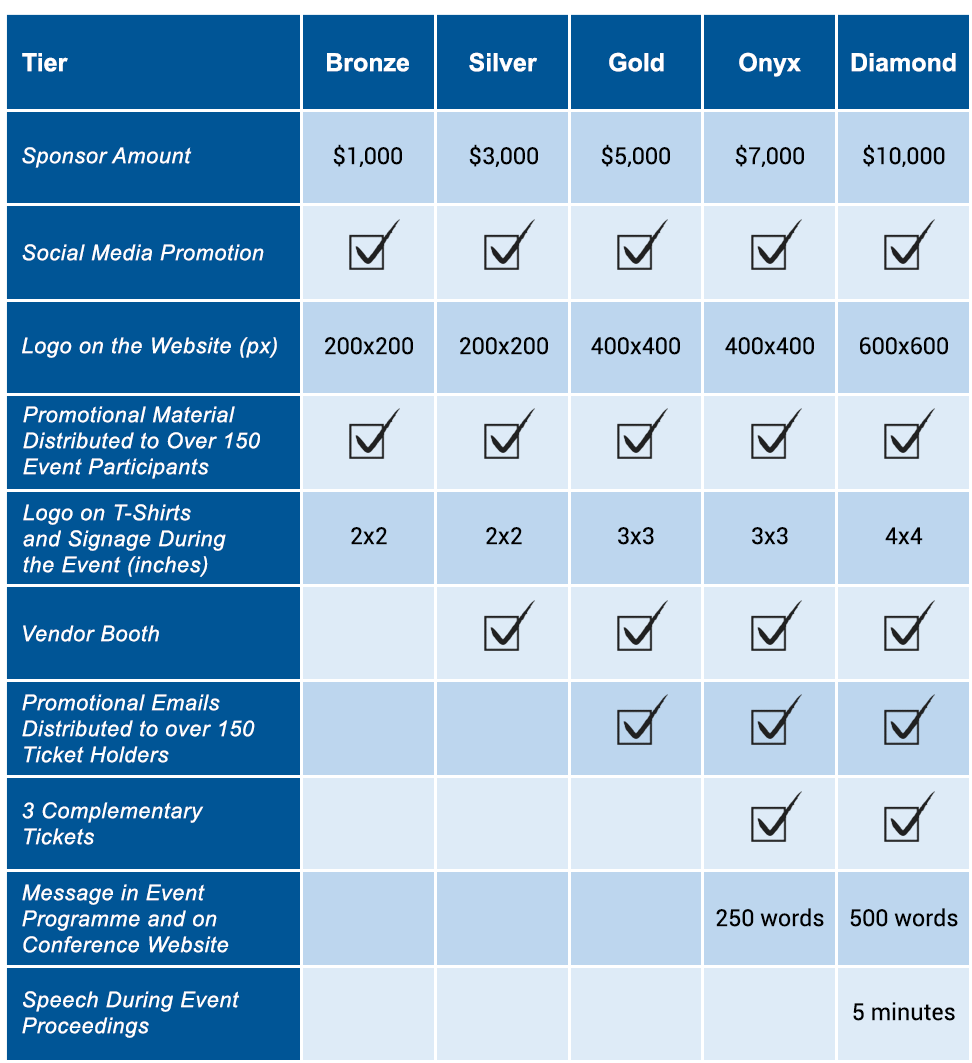
<style>
.page{position:relative;width:972px;height:1063px;background:#005596}
.page>*{position:absolute;margin:0}
.t1{font:25px "Arial-BoldMT";color:#ffffff}
.t2{font:21.7px "Arial-ItalicMT";letter-spacing:0.03em;color:#ffffff}
.t3{font:23.3px "Roboto-Regular";color:#000000}
</style>
<div class="page">
<p class="t1" style="left:22px;top:53px;width:46px;height:19px">Tier</p>
<p class="t1" style="left:327px;top:53px;width:82px;height:19px">Bronze</p>
<p class="t1" style="left:469px;top:52px;width:68px;height:20px">Silver</p>
<p class="t1" style="left:609px;top:52px;width:55px;height:20px">Gold</p>
<p class="t1" style="left:739px;top:52px;width:62px;height:25px">Onyx</p>
<p class="t1" style="left:851px;top:53px;width:105px;height:19px">Diamond</p>
<p class="t2" style="left:22px;top:147px;width:170px;height:21px">Sponsor Amount</p>
<p class="t3" style="left:333px;top:144px;width:69px;height:23px">$1,000</p>
<p class="t3" style="left:469px;top:144px;width:69px;height:23px">$3,000</p>
<p class="t3" style="left:601px;top:144px;width:69px;height:23px">$5,000</p>
<p class="t3" style="left:735px;top:144px;width:69px;height:23px">$7,000</p>
<p class="t3" style="left:863px;top:144px;width:82px;height:23px">$10,000</p>
<p class="t2" style="left:22px;top:244px;width:242px;height:17px">Social Media Promotion</p>
<p class="t2" style="left:22px;top:337px;width:255px;height:21px">Logo on the Website (px)</p>
<p class="t3" style="left:325px;top:337px;width:88px;height:18px">200x200</p>
<p class="t3" style="left:460px;top:337px;width:88px;height:18px">200x200</p>
<p class="t3" style="left:591px;top:337px;width:89px;height:18px">400x400</p>
<p class="t3" style="left:725px;top:337px;width:89px;height:18px">400x400</p>
<p class="t3" style="left:860px;top:337px;width:88px;height:18px">600x600</p>
<p class="t2" style="left:23px;top:406px;width:237px;height:73px">Promotional Material<br>Distributed to Over 150<br>Event Participants</p>
<p class="t2" style="left:23px;top:504px;width:203px;height:73px">Logo on T-Shirts <br>and Signage During<br>the Event (inches)</p>
<p class="t3" style="left:351px;top:527px;width:36px;height:18px">2x2</p>
<p class="t3" style="left:486px;top:527px;width:36px;height:18px">2x2</p>
<p class="t3" style="left:618px;top:527px;width:36px;height:18px">3x3</p>
<p class="t3" style="left:752px;top:527px;width:36px;height:18px">3x3</p>
<p class="t3" style="left:885px;top:527px;width:38px;height:18px">4x4</p>
<p class="t2" style="left:23px;top:625px;width:136px;height:17px">Vendor Booth</p>
<p class="t2" style="left:22px;top:694px;width:233px;height:69px">Promotional Emails <br>Distributed to over 150<br>Ticket Holders</p>
<p class="t2" style="left:22px;top:802px;width:182px;height:43px">3 Complementary<br>Tickets</p>
<p class="t2" style="left:22px;top:884px;width:207px;height:69px">Message in Event <br>Programme and on<br>Conference Website</p>
<p class="t3" style="left:716px;top:908px;width:108px;height:19px">250 words</p>
<p class="t3" style="left:850px;top:908px;width:108px;height:19px">500 words</p>
<p class="t2" style="left:22px;top:991px;width:217px;height:47px">Speech During Event<br>Proceedings</p>
<p class="t3" style="left:853px;top:1002px;width:102px;height:19px">5 minutes</p>
</div>
